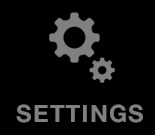
<style>
.page{position:relative;width:155px;height:135px;background:#000000}
.page>*{position:absolute;margin:0}
.t1{font:24px "AlteHaasGrotesk_Bold";letter-spacing:0.05em;color:#808080}
</style>
<div class="page">
<p class="t1" style="left:16px;top:104px;width:127px;height:19px">SETTINGS</p>
</div>
